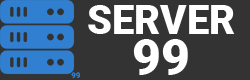
<style>
.page{position:relative;width:250px;height:80px;background:#333333}
.page>*{position:absolute;margin:0}
.t1{font:40.2px "Roboto-Black";color:#ffffff}
.t2{font:50px "Roboto-Black";color:#ffffff}
</style>
<div class="page">
<p class="t1" style="left:88px;top:5px;width:147px;height:29px">SERVER</p>
<p class="t2" style="left:133px;top:39px;width:55px;height:36px">99</p>
</div>
